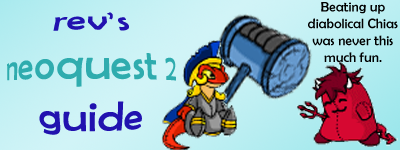
<style>
.page{position:relative;width:400px;height:150px}
.page>*{position:absolute;margin:0}
.t1{font:14px "BerlinSansFB-Reg";color:#000000}
.t2{font:33.6px "BerlinSansFB-Reg";color:#2facae;scale:1.08 1}
.t3{font:33.6px "BerlinSansFB-Reg";color:#2112af;scale:1.08 1}
</style>
<div class="page">
<p class="t1" style="left:308px;top:2px;width:90px;height:60px;text-align:center">Beating up diabolical Chias was never this much fun.</p>
<p class="t2" style="left:7px;top:12px;width:169px;height:123px;text-align:center"><span class="t3">rev’s<br></span>neoquest 2<br><span class="t3">guide</span></p>
</div>
